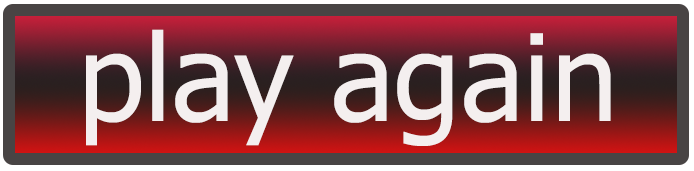
<style>
.page{position:relative;width:694px;height:171px}
.page>*{position:absolute;margin:0}
.t1{font:120px "Tahoma";color:#f4efef}
</style>
<div class="page">
<p class="t1" style="left:86px;top:29px;width:525px;height:117px">play again</p>
</div>
